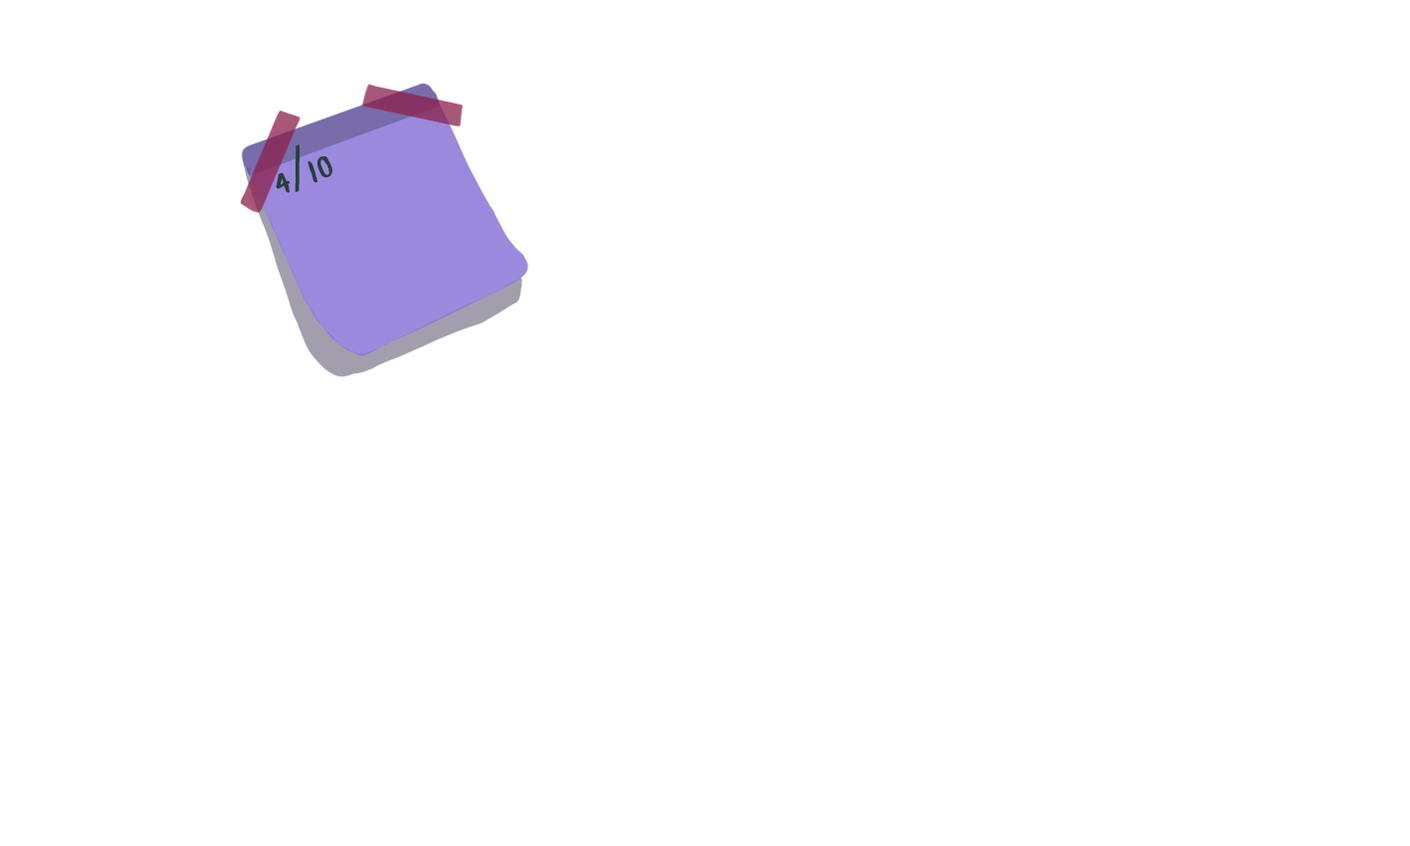
<style>
.page{position:relative;width:1410px;height:846px;background:#ffffff}
.page>*{position:absolute;margin:0}
.t1{font:59.7px "BabyFox";color:#283e3b;text-transform:uppercase}
.t2{font:59.7px "MyriadPro-Regular";color:#283e3b;text-transform:uppercase}
</style>
<div class="page">
<p class="t1" style="left:276px;top:144px;width:56px;height:49px;rotate:-20deg">4<span class="t2">/</span>10</p>
</div>
